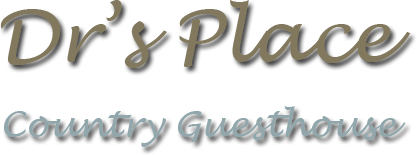
<style>
.page{position:relative;width:417px;height:155px;background:#ffffff}
.page>*{position:absolute;margin:0}
.t1{font:72px "LucidaHandwriting-Italic";color:#81785e}
.t2{font:36px "LucidaHandwriting-Italic";color:#91a7ac}
</style>
<div class="page">
<p class="t1" style="left:0px;top:0px;width:411px;height:68px">Dr’s Place</p>
<p class="t2" style="left:4px;top:106px;width:402px;height:41px">Country Guesthouse</p>
</div>
